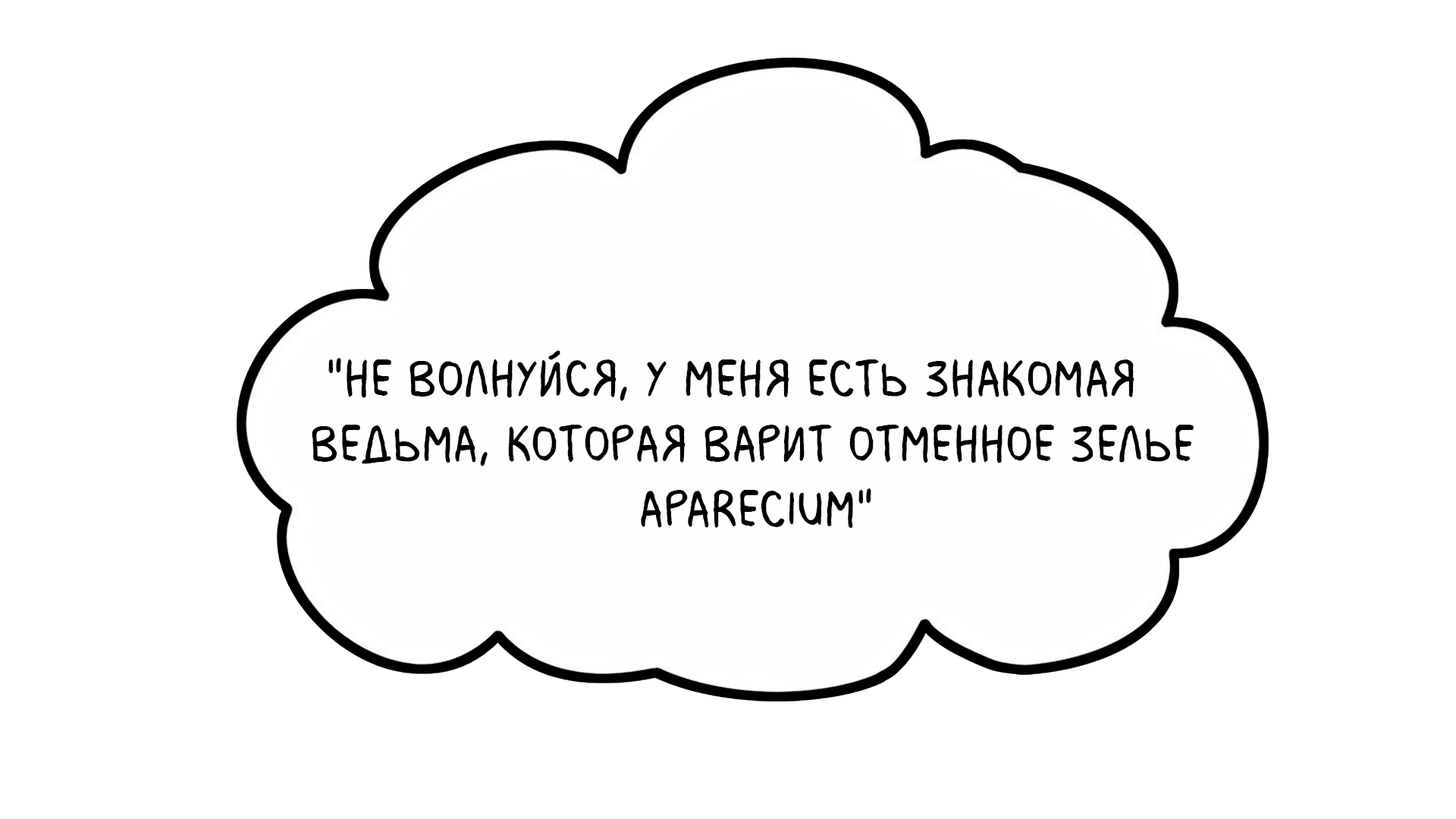
<style>
.page{position:relative;width:1456px;height:819px;background:#ffffff}
.page>*{position:absolute;margin:0}
.t1{font:54.6px "MilkMustacheBB";color:#000000}
</style>
<div class="page">
<p class="t1" style="left:312px;top:350px;width:882px;height:178px">"Не волнуйся, у меня есть знакомая <br>ведьма, которая варит отменное зелье <br>                     Aparecium"</p>
</div>
